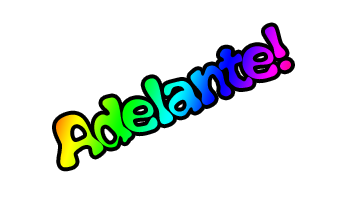
<style>
.page{position:relative;width:350px;height:200px;background:#ffffff}
.page>*{position:absolute;margin:0}
.t1{font:60px "Flubber"}
</style>
<div class="page">
<p class="t1" style="left:56px;top:26px;width:235px;height:142px;rotate:-24deg">Adelante!</p>
</div>
